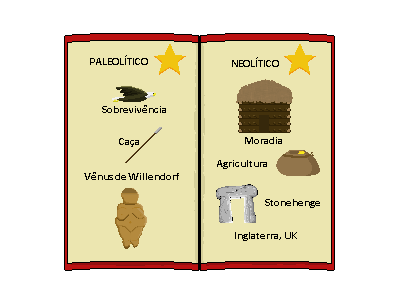
<style>
.page{position:relative;width:400px;height:300px;background:#ffffff}
.page>*{position:absolute;margin:0}
.t1{font:11px "Calibri-Bold";color:#010101}
.t2{font:11px "Calibri-Bold";color:#000000}
</style>
<div class="page">
<p class="t1" style="left:90px;top:55px;width:58px;height:10px">PALEOLÍTICO</p>
<p class="t1" style="left:232px;top:57px;width:47px;height:10px">NEOLÍTICO</p>
<p class="t1" style="left:102px;top:105px;width:64px;height:8px">Sobrevivência</p>
<p class="t2" style="left:245px;top:137px;width:37px;height:7px">Moradia</p>
<p class="t1" style="left:119px;top:138px;width:20px;height:9px">Caça</p>
<p class="t2" style="left:217px;top:160px;width:50px;height:9px">Agricultura</p>
<p class="t1" style="left:84px;top:172px;width:95px;height:8px">Vênus de Willendorf</p>
<p class="t2" style="left:265px;top:199px;width:55px;height:9px">Stonehenge</p>
<p class="t2" style="left:235px;top:232px;width:62px;height:9px">Inglaterra, UK</p>
</div>
